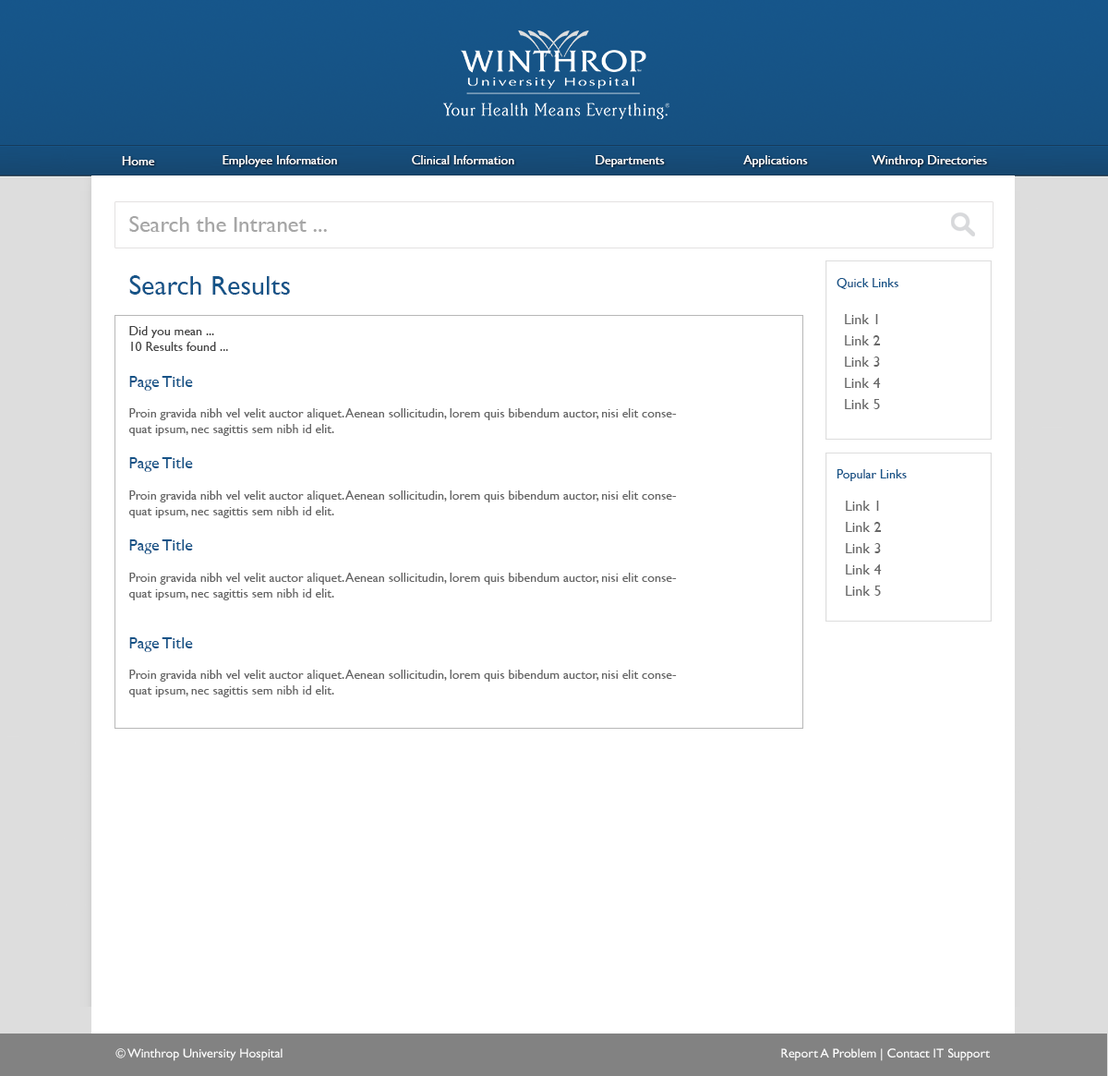
<style>
.page{position:relative;width:1108px;height:1076px;background:#ffffff}
.page>*{position:absolute;margin:0}
.t1{font:12.9px "GillSans";color:#ffffff}
.t2{font:22.2px "GillSans";color:#a6a6a6;scale:1.03 1}
.t3{font:27.7px "GillSans";color:#165488}
.t4{font:12.9px "GillSans";color:#165488}
.t5{font:14.8px/21.2px "GillSans";color:#666666}
.t6{font:12.9px "GillSans";color:#666666}
.t7{font:12.9px "GillSans";color:#444444}
.t8{font:16.6px "GillSans";color:#165387}
</style>
<div class="page">
<p class="t1" style="left:122px;top:156px;width:33px;height:9px">Home</p>
<p class="t1" style="left:223px;top:155px;width:114px;height:12px">Employee Information</p>
<p class="t1" style="left:412px;top:155px;width:102px;height:9px">Clinical Information</p>
<p class="t1" style="left:596px;top:155px;width:69px;height:12px">Departments</p>
<p class="t1" style="left:743px;top:155px;width:65px;height:12px">Applications</p>
<p class="t1" style="left:872px;top:155px;width:115px;height:12px">Winthrop Directories</p>
<p class="t2" style="left:129px;top:216px;width:198px;height:16px">Search the Intranet ...</p>
<p class="t3" style="left:129px;top:275px;width:161px;height:20px">Search Results</p>
<p class="t4" style="left:837px;top:278px;width:62px;height:11px">Quick Links</p>
<p class="t5" style="left:845px;top:314px;width:36px;height:95px">Link 1<br>Link 2<br>Link 3<br>Link 4<br>Link 5</p>
<p class="t6" style="left:128px;top:326px;width:549px;height:371px"><span class="t7">Did you mean ...<br>10 Results found ...<br><br></span><span class="t8">Page Title<br></span><br>Proin gravida nibh vel velit auctor aliquet. Aenean sollicitudin, lorem quis bibendum auctor, nisi elit consequat ipsum, nec sagittis sem nibh id elit. <br><br><span class="t8">Page Title<br></span><br>Proin gravida nibh vel velit auctor aliquet. Aenean sollicitudin, lorem quis bibendum auctor, nisi elit consequat ipsum, nec sagittis sem nibh id elit. <br><br><span class="t8">Page Title<br></span><br>Proin gravida nibh vel velit auctor aliquet. Aenean sollicitudin, lorem quis bibendum auctor, nisi elit consequat ipsum, nec sagittis sem nibh id elit. <br><br><br><span class="t8">Page Title<br></span><br>Proin gravida nibh vel velit auctor aliquet. Aenean sollicitudin, lorem quis bibendum auctor, nisi elit consequat ipsum, nec sagittis sem nibh id elit.</p>
<p class="t4" style="left:837px;top:469px;width:70px;height:12px">Popular Links</p>
<p class="t5" style="left:846px;top:501px;width:36px;height:95px">Link 1<br>Link 2<br>Link 3<br>Link 4<br>Link 5</p>
<p class="t1" style="left:115px;top:1048px;width:875px;height:13px">© Winthrop University Hospital                       Report A Problem | Contact IT Support</p>
</div>
